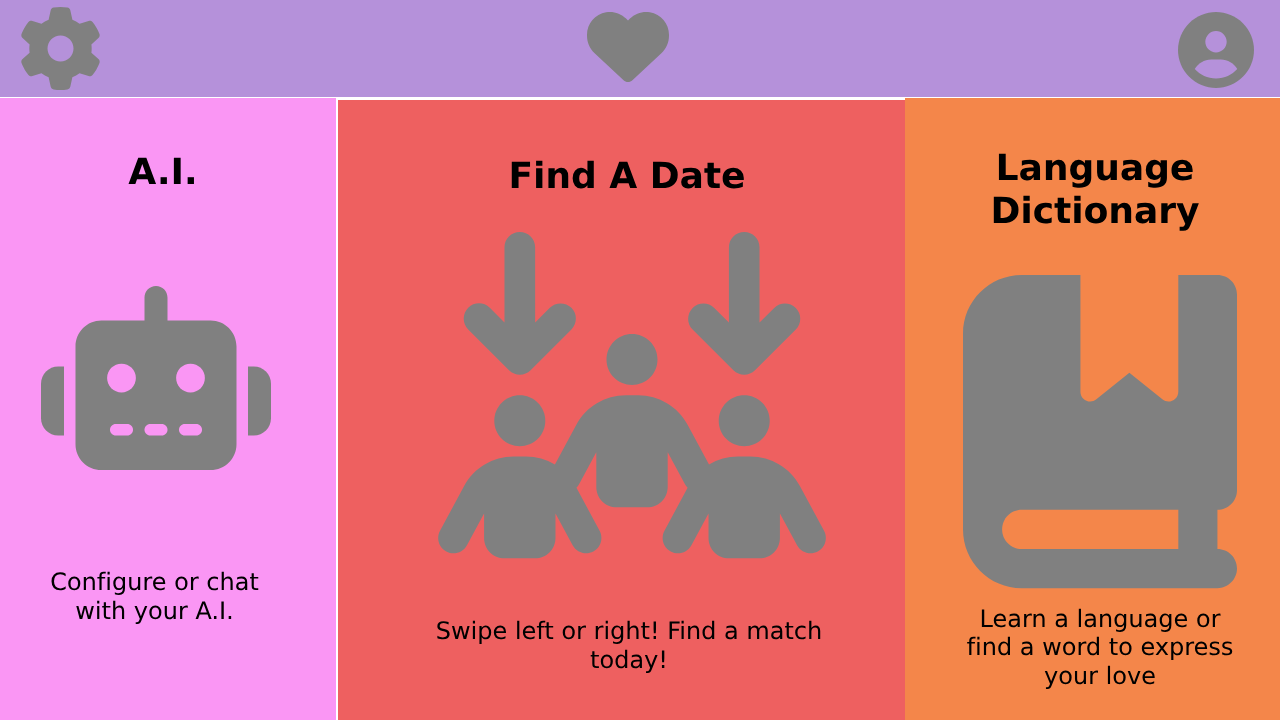
<style>
.page{position:relative;width:1280px;height:720px;background:#ee6060}
.page>*{position:absolute;margin:0}
.t1{font:36px "DejaVuSans-Bold";color:#000000}
.t2{font:24px "DejaVuSans";color:#000000}
</style>
<div class="page">
<p class="t1" style="left:128px;top:157px;width:66px;height:27px">A.I.</p>
<p class="t1" style="left:511px;top:160px;width:233px;height:29px">Find A Date</p>
<p class="t1" style="left:993px;top:153px;width:206px;height:78px;text-align:center">Language Dictionary</p>
<p class="t2" style="left:51px;top:571px;width:208px;height:53px;text-align:center">Configure or chat with your A.I.</p>
<p class="t2" style="left:967px;top:608px;width:266px;height:81px;text-align:center">Learn a language or find a word to express your love</p>
<p class="t2" style="left:437px;top:620px;width:384px;height:53px;text-align:center">Swipe left or right! Find a match today!</p>
</div>
